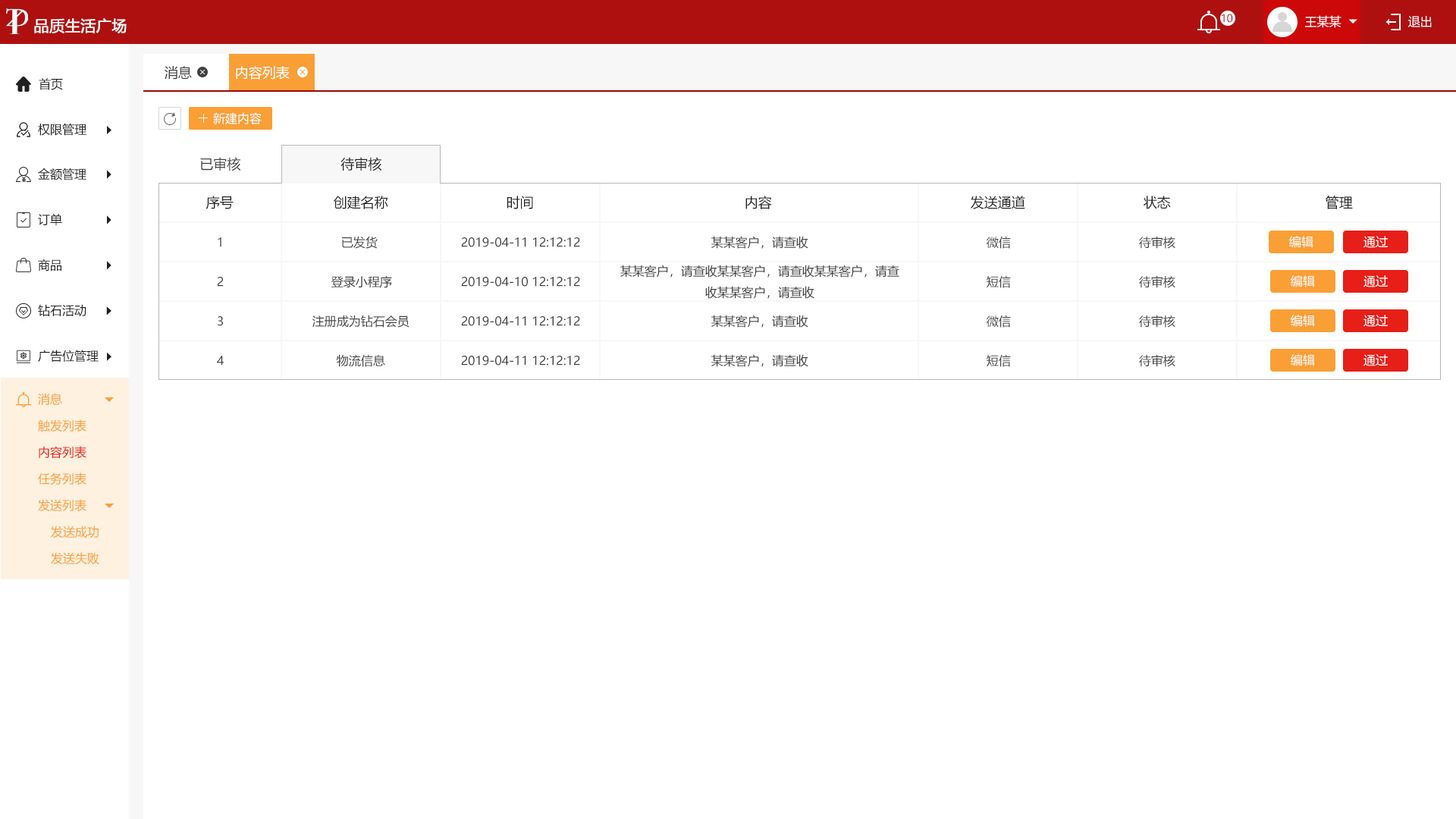
<style>
.page{position:relative;width:1456px;height:819px;background:#ffffff}
.page>*{position:absolute;margin:0}
.t1{font:10.6px "MicrosoftYaHei";color:#9c0606;text-transform:uppercase}
.t2{font:12.1px "MicrosoftYaHei";color:#ffffff;text-transform:uppercase}
.t3{font:15.2px "MicrosoftYaHei";color:#ffffff;text-transform:uppercase;font-weight:bold}
.t4{font:13.6px "MicrosoftYaHei";color:#404040;text-transform:uppercase}
.t5{font:13.6px "MicrosoftYaHei";color:#ffffff;text-transform:uppercase}
.t6{font:12.1px "MicrosoftYaHei";color:#202020;text-transform:uppercase}
.t7{font:13.6px "MicrosoftYaHei";color:#202020;text-transform:uppercase}
.t8{font:12.1px "MicrosoftYaHei";color:#404040;text-transform:uppercase}
.t9{font:12.1px "MicrosoftYaHei";color:#f99f36;text-transform:uppercase}
.t10{font:12.1px "MicrosoftYaHei";color:#e61f18;text-transform:uppercase}
</style>
<div class="page">
<p class="t1" style="left:1222px;top:14px;width:11px;height:9px">10</p>
<p class="t2" style="left:1305px;top:15px;width:36px;height:13px">王某某</p>
<p class="t2" style="left:1408px;top:16px;width:24px;height:11px">退出</p>
<p class="t3" style="left:34px;top:18px;width:93px;height:15px">品质生活广场</p>
<p class="t4" style="left:165px;top:66px;width:27px;height:14px">消息</p>
<p class="t5" style="left:236px;top:66px;width:54px;height:14px">内容列表</p>
<p class="t6" style="left:39px;top:78px;width:24px;height:12px">首页</p>
<p class="t2" style="left:213px;top:112px;width:49px;height:12px">新建内容</p>
<p class="t6" style="left:38px;top:123px;width:48px;height:13px">权限管理</p>
<p class="t4" style="left:200px;top:157px;width:41px;height:14px">已审核</p>
<p class="t7" style="left:340px;top:157px;width:42px;height:14px">待审核</p>
<p class="t6" style="left:38px;top:168px;width:48px;height:12px">金额管理</p>
<p class="t7" style="left:206px;top:196px;width:28px;height:13px">序号</p>
<p class="t7" style="left:334px;top:196px;width:54px;height:13px">创建名称</p>
<p class="t7" style="left:507px;top:196px;width:26px;height:13px">时间</p>
<p class="t7" style="left:745px;top:196px;width:27px;height:13px">内容</p>
<p class="t7" style="left:971px;top:196px;width:54px;height:13px">发送通道</p>
<p class="t7" style="left:1143px;top:196px;width:28px;height:13px">状态</p>
<p class="t7" style="left:1326px;top:196px;width:27px;height:13px">管理</p>
<p class="t6" style="left:38px;top:213px;width:24px;height:13px">订单</p>
<p class="t8" style="left:218px;top:237px;width:3px;height:10px">1</p>
<p class="t8" style="left:342px;top:236px;width:36px;height:13px">已发货</p>
<p class="t8" style="left:461px;top:237px;width:119px;height:10px">2019-04-11 12:12:12</p>
<p class="t8" style="left:711px;top:236px;width:97px;height:13px">某某客户，请查收</p>
<p class="t8" style="left:987px;top:236px;width:24px;height:13px">微信</p>
<p class="t8" style="left:1139px;top:236px;width:36px;height:13px">待审核</p>
<p class="t2" style="left:1289px;top:236px;width:24px;height:12px">编辑</p>
<p class="t2" style="left:1363px;top:236px;width:25px;height:12px">通过</p>
<p class="t6" style="left:38px;top:259px;width:23px;height:12px">商品</p>
<p class="t8" style="left:620px;top:265px;width:279px;height:34px;text-align:center">某某客户，请查收某某客户，请查收某某客户，请查<br>收某某客户，请查收</p>
<p class="t8" style="left:217px;top:277px;width:7px;height:10px">2</p>
<p class="t8" style="left:331px;top:275px;width:61px;height:13px">登录小程序</p>
<p class="t8" style="left:461px;top:277px;width:119px;height:10px">2019-04-10 12:12:12</p>
<p class="t8" style="left:987px;top:275px;width:24px;height:13px">短信</p>
<p class="t8" style="left:1139px;top:275px;width:36px;height:13px">待审核</p>
<p class="t2" style="left:1291px;top:275px;width:24px;height:12px">编辑</p>
<p class="t2" style="left:1363px;top:275px;width:25px;height:12px">通过</p>
<p class="t6" style="left:38px;top:304px;width:48px;height:12px">钻石活动</p>
<p class="t8" style="left:218px;top:316px;width:5px;height:10px">3</p>
<p class="t8" style="left:312px;top:315px;width:97px;height:13px">注册成为钻石会员</p>
<p class="t8" style="left:461px;top:316px;width:119px;height:10px">2019-04-11 12:12:12</p>
<p class="t8" style="left:711px;top:315px;width:97px;height:13px">某某客户，请查收</p>
<p class="t8" style="left:987px;top:315px;width:24px;height:13px">微信</p>
<p class="t8" style="left:1139px;top:315px;width:36px;height:13px">待审核</p>
<p class="t2" style="left:1291px;top:315px;width:24px;height:12px">编辑</p>
<p class="t2" style="left:1363px;top:315px;width:25px;height:12px">通过</p>
<p class="t6" style="left:38px;top:350px;width:61px;height:12px">广告位管理</p>
<p class="t8" style="left:217px;top:356px;width:7px;height:10px">4</p>
<p class="t8" style="left:336px;top:354px;width:49px;height:13px">物流信息</p>
<p class="t8" style="left:461px;top:356px;width:119px;height:10px">2019-04-11 12:12:12</p>
<p class="t8" style="left:711px;top:354px;width:97px;height:13px">某某客户，请查收</p>
<p class="t8" style="left:987px;top:354px;width:24px;height:13px">短信</p>
<p class="t8" style="left:1139px;top:354px;width:36px;height:13px">待审核</p>
<p class="t2" style="left:1291px;top:354px;width:24px;height:12px">编辑</p>
<p class="t2" style="left:1363px;top:354px;width:25px;height:12px">通过</p>
<p class="t9" style="left:38px;top:393px;width:24px;height:12px">消息</p>
<p class="t9" style="left:38px;top:419px;width:48px;height:12px">触发列表</p>
<p class="t10" style="left:39px;top:446px;width:47px;height:13px">内容列表</p>
<p class="t9" style="left:38px;top:472px;width:48px;height:13px">任务列表</p>
<p class="t9" style="left:38px;top:499px;width:48px;height:12px">发送列表</p>
<p class="t9" style="left:51px;top:526px;width:48px;height:12px">发送成功</p>
<p class="t9" style="left:51px;top:552px;width:48px;height:13px">发送失败</p>
</div>
